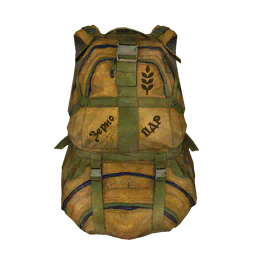
<style>
.page{position:relative;width:256px;height:256px;background:#ffffff}
.page>*{position:absolute;margin:0}
.t1{font:12.8px "NK123";letter-spacing:-0.04em;color:#36280c;font-weight:bold;scale:0.95 1}
.t2{font:12.8px "NK123";letter-spacing:-0.04em;color:#382b13;font-weight:bold;scale:0.95 1}
</style>
<div class="page">
<p class="t1" style="left:88px;top:115px;width:27px;height:27px;rotate:-47deg">Зерно</p>
<p class="t2" style="left:141px;top:115px;width:20px;height:23px;rotate:-47deg">ПДР</p>
</div>
